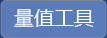
<style>
.page{position:relative;width:107px;height:38px;background:#5a7cbb}
.page>*{position:absolute;margin:0}
.t1{font:20px "MicrosoftYaHei";color:#ffffff}
</style>
<div class="page">
<p class="t1" style="left:14px;top:9px;width:80px;height:18px">量值工具</p>
</div>
